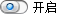
<style>
.page{position:relative;width:60px;height:14px;background:#ffffff}
.page>*{position:absolute;margin:0}
.t1{font:12px "SimSun";letter-spacing:-0.025em;color:#000000}
</style>
<div class="page">
<p class="t1" style="left:33px;top:1px;width:23px;height:12px">开启</p>
</div>
